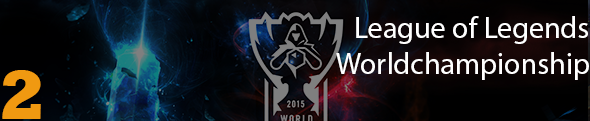
<style>
.page{position:relative;width:590px;height:121px}
.page>*{position:absolute;margin:0}
.t1{font:30px "MyriadPro-Regular";color:#ffffff}
.t2{font:70px "Rockwell-ExtraBold";color:#f09911}
</style>
<div class="page">
<p class="t1" style="left:356px;top:16px;width:232px;height:28px">League of Legends</p>
<p class="t1" style="left:336px;top:52px;width:253px;height:28px">Worldchampionship</p>
<p class="t2" style="left:2px;top:70px;width:39px;height:49px">2</p>
</div>
